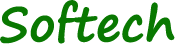
<style>
.page{position:relative;width:180px;height:45px;background:#ffffff}
.page>*{position:absolute;margin:0}
.t1{font:48px "SegoePrint-Bold";color:#097801}
</style>
<div class="page">
<p class="t1" style="left:0px;top:0px;width:175px;height:44px">Softech</p>
</div>
